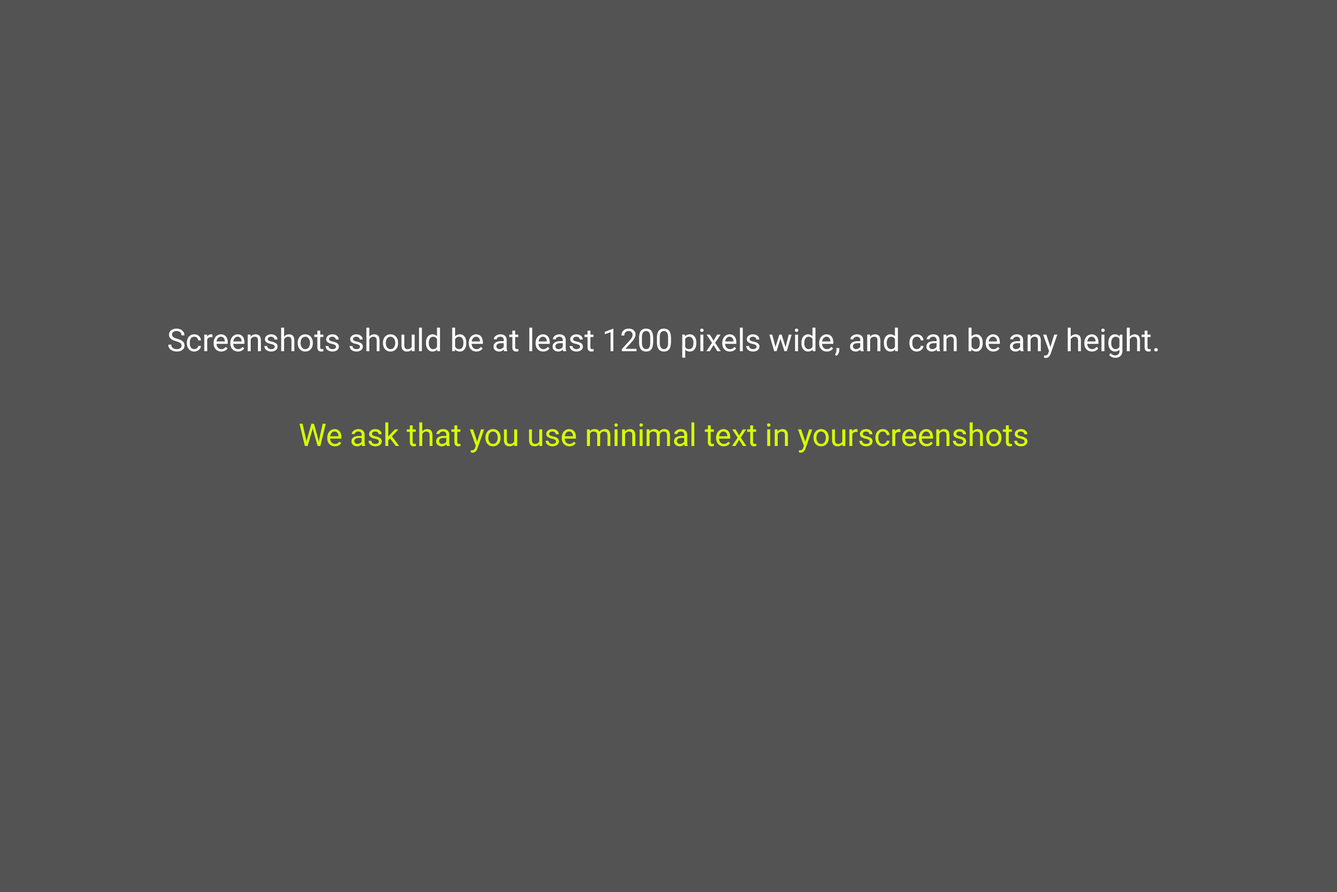
<style>
.page{position:relative;width:1337px;height:892px;background:#535353}
.page>*{position:absolute;margin:0}
.t1{font:31.3px/95.1px "Roboto-Regular";color:#ffffff}
.t2{font:31.3px/95.1px "Roboto-Regular";color:#d8ff00}
</style>
<div class="page">
<p class="t1" style="left:168px;top:327px;width:991px;height:125px;text-align:center">Screenshots should be at least 1200 pixels wide, and can be any height.<br><span class="t2">We ask that you use minimal text in yourscreenshots</span></p>
</div>
